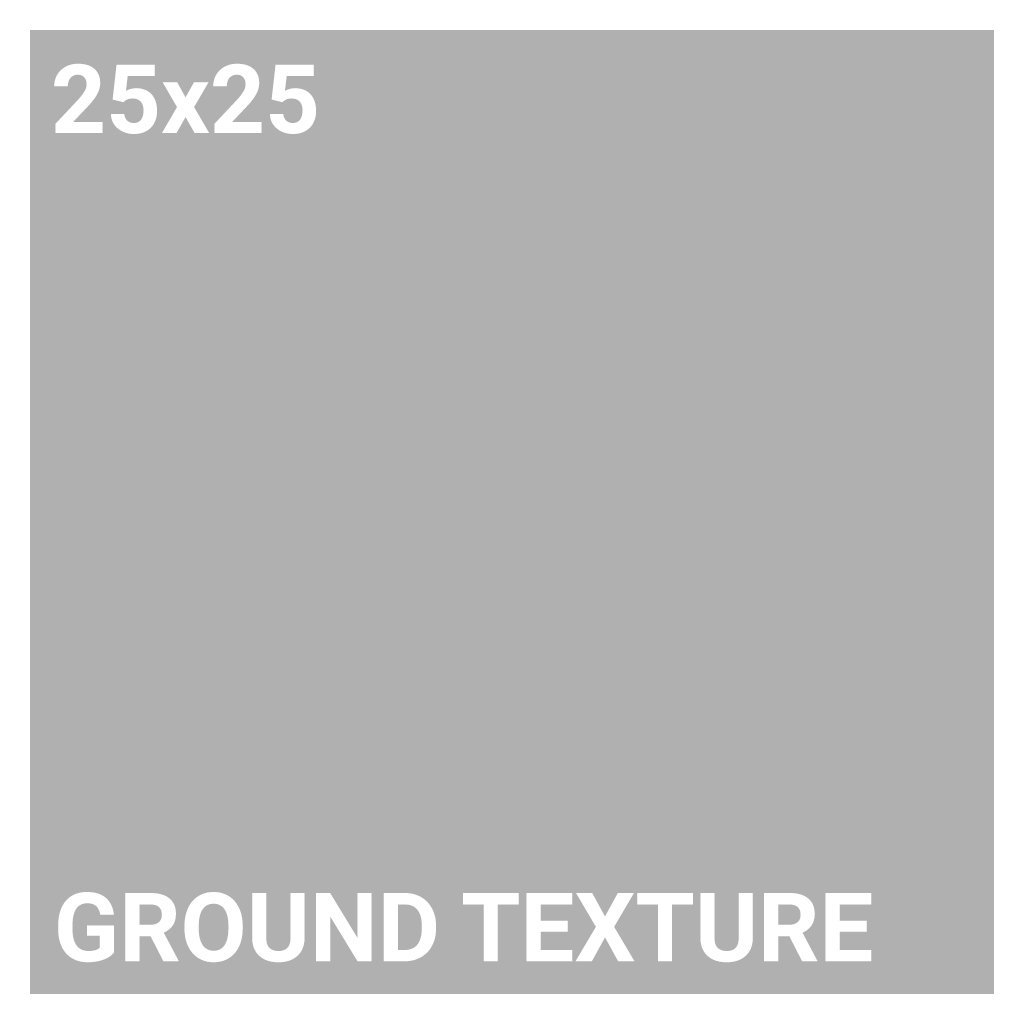
<style>
.page{position:relative;width:1024px;height:1024px;background:#b0b0b0}
.page>*{position:absolute;margin:0}
.t1{font:96px "Roboto-Bold";color:#ffffff}
</style>
<div class="page">
<p class="t1" style="left:54px;top:63px;width:262px;height:71px">25x25</p>
<p class="t1" style="left:58px;top:892px;width:814px;height:71px">GROUND TEXTURE</p>
</div>
